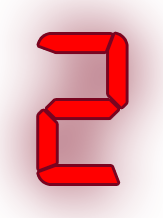
<style>
.page{position:relative;width:163px;height:218px}
.page>*{position:absolute;margin:0}
.t1{font:225.9px "Digital-7";color:#ff0000}
</style>
<div class="page">
<p class="t1" style="left:39px;top:34px;width:87px;height:149px">2</p>
</div>
